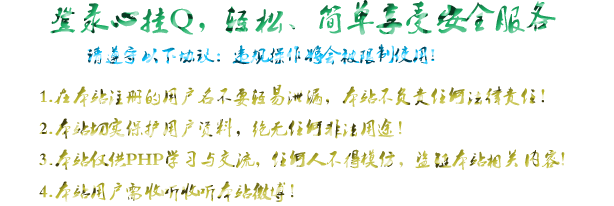
<style>
.page{position:relative;width:614px;height:206px;background:#ffffff}
.page>*{position:absolute;margin:0}
.t1{font:30px "Ò¶¸ùÓÑÃ«±ÊÐÐÊé¼òÌå"}
.t2{font:18px "Ò¶¸ùÓÑÃ«±ÊÐÐÊé¼òÌå"}
</style>
<div class="page">
<p class="t1" style="left:50px;top:0px;width:506px;height:35px">登录心挂Q，轻松、简单享受安全服务</p>
<p class="t2" style="left:87px;top:44px;width:348px;height:21px">请遵守以下协议：违规操作将会被限制使用!</p>
<p class="t2" style="left:39px;top:84px;width:526px;height:118px">1.在本站注册的用户名不要轻易泄漏，本站不负责任何法律责任！<br>2.本站切实保护用户资料，绝无任何非法用途！<br>3.本站仅供PHP学习与交流，任何人不得模仿，盗链本站相关内容！<br>4.本站用户需收听收听本站微博！</p>
</div>
